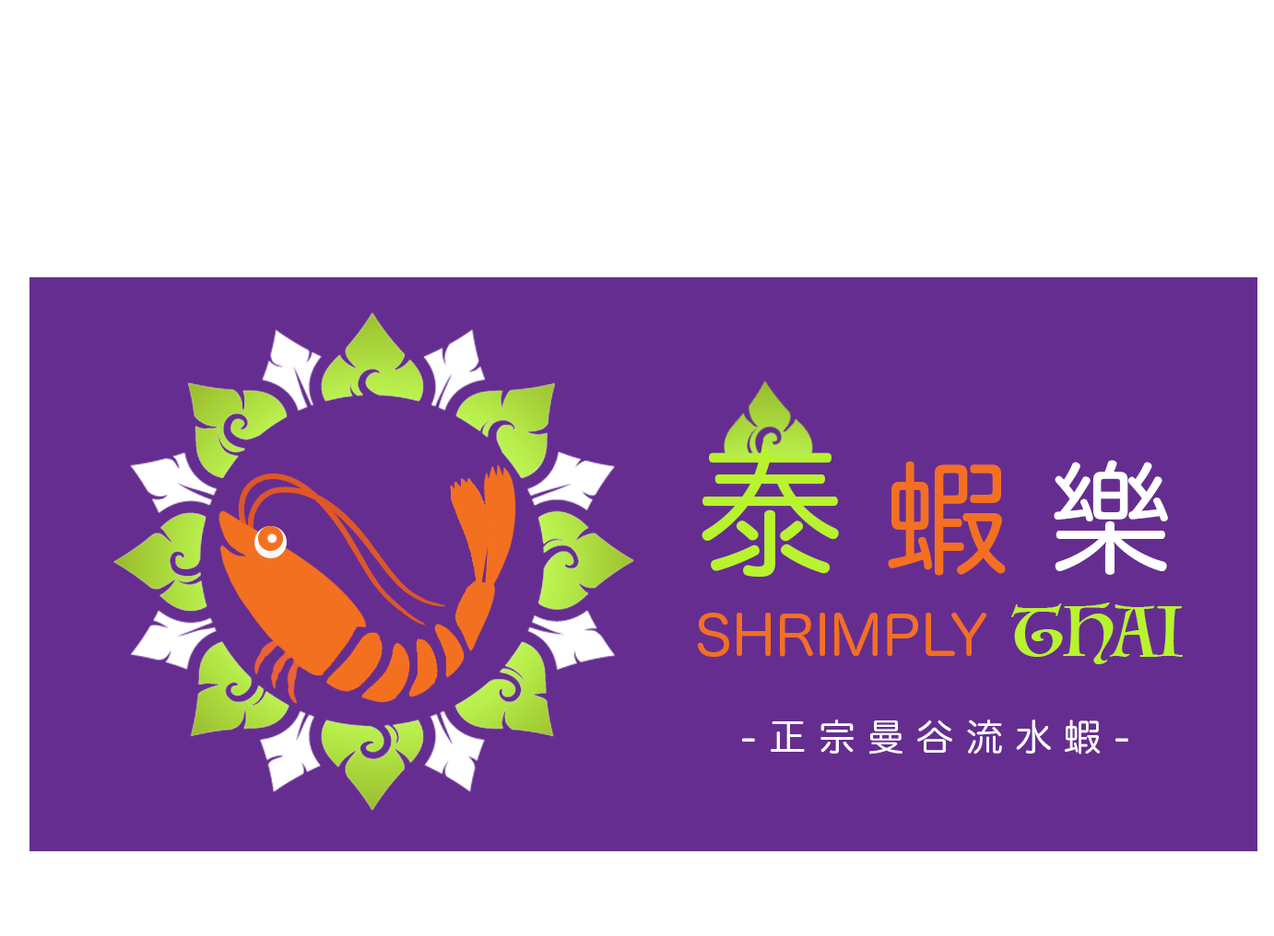
<style>
.page{position:relative;width:1274px;height:936px;background:#662d91}
.page>*{position:absolute;margin:0}
.t1{font:147.4px "HiraMaruProN-W4";color:#b8f32e}
.t2{font:122.9px "HiraMaruProN-W4";color:#f37021}
.t3{font:122.9px "HiraMaruProN-W4";color:#ffffff}
.t4{font:55.1px "HiraMaruProN-W4";color:#f37021}
.t5{font:68.9px "Luminari-Regular";color:#b8f32e}
.t6{font:36.9px "HiraMaruProN-W4";color:#ffffff}
</style>
<div class="page">
<p class="t1" style="left:701px;top:440px;width:467px;height:137px">泰 <span class="t2">蝦</span><span class="t3"> 樂</span></p>
<p class="t4" style="left:697px;top:603px;width:485px;height:61px">SHRIMPLY <span class="t5">THAI</span></p>
<p class="t6" style="left:742px;top:720px;width:386px;height:35px">- 正 宗 曼 谷 流 水 蝦 -</p>
</div>
